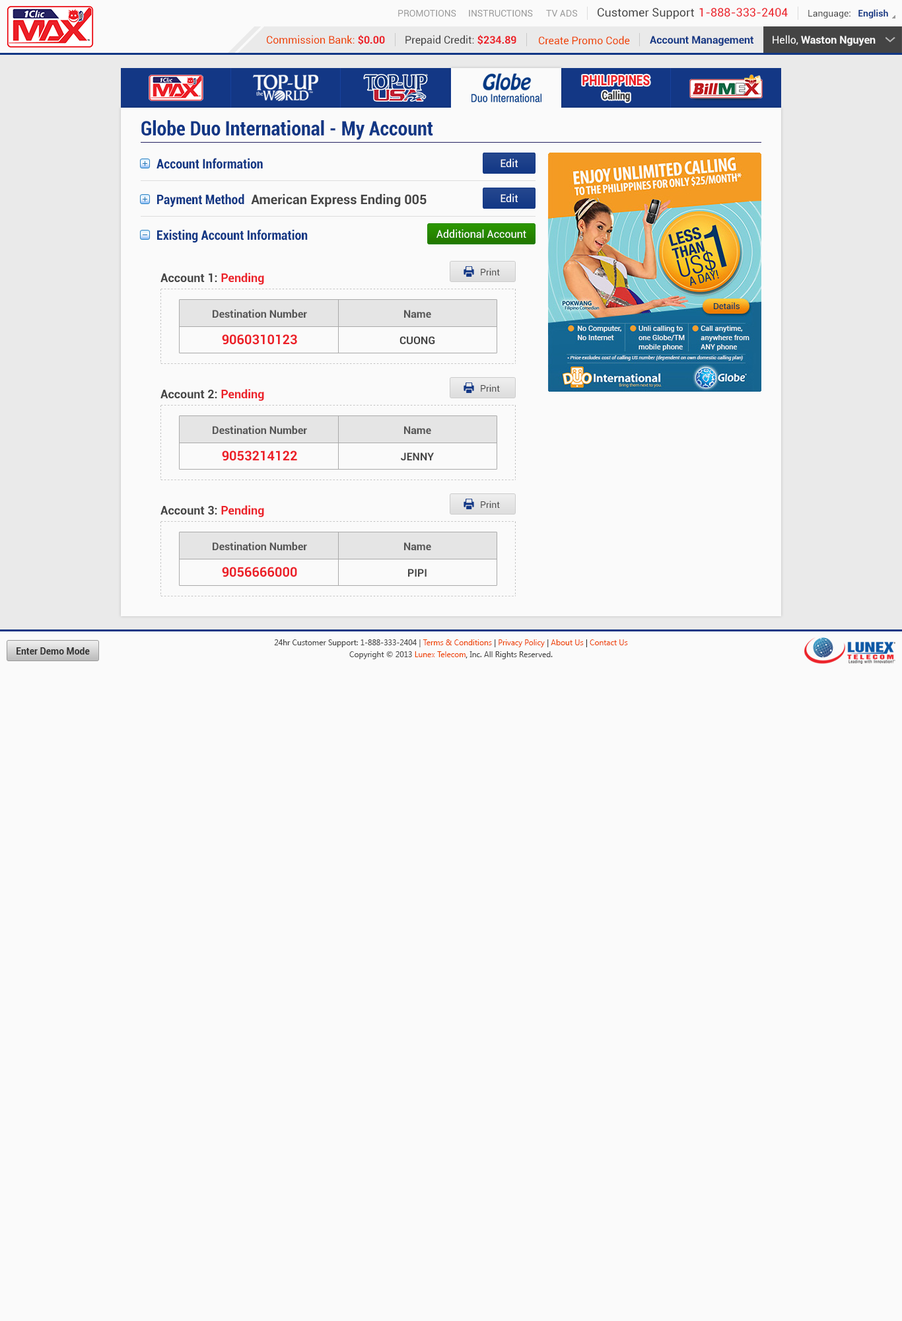
<style>
.page{position:relative;width:902px;height:1321px;background:#fafafa}
.page>*{position:absolute;margin:0}
.t1{font:9.2px "Roboto-Regular";color:#999999}
.t2{font:11.6px "Roboto-Regular";color:#444444}
.t3{font:11.6px "Roboto-Regular";color:#ec2029}
.t4{font:9.2px "Roboto-Regular";color:#444444}
.t5{font:9.2px "Roboto-Bold";color:#123785}
.t6{font:10.6px "Roboto-Regular";color:#ee4400}
.t7{font:10.6px "Roboto-Bold";color:#ec2028}
.t8{font:10.6px "Roboto-Regular";color:#444444}
.t9{font:10.6px "Roboto-Bold";color:#123785}
.t10{font:10.6px "Roboto-Bold";color:#fafafa}
.t11{font:10.6px "Roboto-Regular";color:#fafafa}
.t12{font:14.1px "Roboto-Black";color:#ec2028;scale:0.81 1}
.t13{font:11.3px "Roboto-Black";color:#333333;scale:0.81 1}
.t14{font:19.8px "Roboto-BoldCondensed";color:#123785}
.t15{font:13.2px "Roboto-BoldCondensed";color:#123785}
.t16{font:10.6px "Roboto-Regular";color:#ffffff}
.t17{font:13.2px "Roboto-Bold";color:#444444}
.t18{font:11.9px "Roboto-Bold";color:#444444}
.t19{font:11.9px "Roboto-Bold";color:#ec222a}
.t20{font:10.6px "Roboto-Bold";color:#555555}
.t21{font:13.2px "Roboto-Bold";color:#ec2028}
.t22{font:10.6px "Roboto-Bold";color:#444444}
.t23{font:7.9px/11.9px "SegoeUI";color:#444444}
.t24{font:7.9px/11.9px "SegoeUI";color:#ee4400}
.t25{font:7.9px/11.9px "SegoeUI";color:#333333}
.t26{font:9.2px "Roboto-Bold";color:#333333}
</style>
<div class="page">
<p class="t1" style="left:398px;top:10px;width:59px;height:7px">PROMOTIONS</p>
<p class="t1" style="left:469px;top:10px;width:64px;height:7px">INSTRUCTIONS</p>
<p class="t1" style="left:546px;top:10px;width:31px;height:7px">TV ADS</p>
<p class="t2" style="left:598px;top:8px;width:96px;height:11px">Customer Support</p>
<p class="t3" style="left:700px;top:8px;width:88px;height:9px">1-888-333-2404</p>
<p class="t4" style="left:809px;top:9px;width:80px;height:9px">Language:   <span class="t5">English</span></p>
<p class="t6" style="left:267px;top:35px;width:118px;height:10px">Commission Bank: <span class="t7">$0.00</span></p>
<p class="t8" style="left:406px;top:35px;width:111px;height:11px">Prepaid Credit: <span class="t7">$234.89</span></p>
<p class="t6" style="left:539px;top:36px;width:91px;height:9px">Create Promo Code</p>
<p class="t9" style="left:650px;top:36px;width:104px;height:10px">Account Management</p>
<p class="t10" style="left:773px;top:35px;width:103px;height:11px"><span class="t11">Hello, </span>Waston Nguyen</p>
<p class="t12" style="left:583px;top:75px;width:67px;height:11px">PHILIPPINES</p>
<p class="t13" style="left:603px;top:91px;width:27px;height:11px">Calling</p>
<p class="t14" style="left:141px;top:120px;width:292px;height:20px">Globe Duo International - My Account</p>
<p class="t15" style="left:157px;top:158px;width:106px;height:11px">Account Information</p>
<p class="t16" style="left:501px;top:159px;width:18px;height:8px">Edit</p>
<p class="t17" style="left:157px;top:194px;width:270px;height:13px"><span class="t15">Payment Method</span>  American Express Ending 005</p>
<p class="t16" style="left:501px;top:194px;width:18px;height:8px">Edit</p>
<p class="t15" style="left:157px;top:229px;width:151px;height:14px">Existing Account Information</p>
<p class="t16" style="left:437px;top:229px;width:90px;height:9px">Additional Account</p>
<p class="t4" style="left:481px;top:268px;width:19px;height:7px">Print</p>
<p class="t18" style="left:161px;top:273px;width:103px;height:12px">Account 1: <span class="t19">Pending</span></p>
<p class="t20" style="left:213px;top:309px;width:94px;height:9px">Destination Number</p>
<p class="t20" style="left:404px;top:310px;width:27px;height:8px">Name</p>
<p class="t21" style="left:222px;top:334px;width:75px;height:11px">9060310123</p>
<p class="t22" style="left:400px;top:336px;width:35px;height:8px">CUONG</p>
<p class="t18" style="left:161px;top:389px;width:103px;height:12px">Account 2: <span class="t19">Pending</span></p>
<p class="t4" style="left:481px;top:385px;width:19px;height:7px">Print</p>
<p class="t20" style="left:213px;top:425px;width:94px;height:10px">Destination Number</p>
<p class="t20" style="left:404px;top:426px;width:27px;height:9px">Name</p>
<p class="t21" style="left:222px;top:451px;width:75px;height:10px">9053214122</p>
<p class="t22" style="left:401px;top:453px;width:33px;height:7px">JENNY</p>
<p class="t18" style="left:161px;top:505px;width:103px;height:12px">Account 3: <span class="t19">Pending</span></p>
<p class="t4" style="left:481px;top:501px;width:19px;height:7px">Print</p>
<p class="t20" style="left:213px;top:542px;width:94px;height:9px">Destination Number</p>
<p class="t20" style="left:404px;top:542px;width:27px;height:9px">Name</p>
<p class="t21" style="left:222px;top:567px;width:75px;height:10px">9056666000</p>
<p class="t22" style="left:408px;top:569px;width:19px;height:8px">PIPI</p>
<p class="t23" style="left:274px;top:640px;width:354px;height:19px;text-align:center">24hr Customer Support: 1-888-333-2404 | <span class="t24">Terms &amp; Conditions</span><span class="t25"> | </span><span class="t24">Privacy Policy</span><span class="t25"> | </span><span class="t24">About Us</span><span class="t25"> | </span><span class="t24">Contact Us<br></span>Copyright © 2013 <span class="t24">Lunex Telecom</span><span class="t25">,</span> Inc. All Rights Reserved.</p>
<p class="t26" style="left:17px;top:647px;width:73px;height:8px">Enter Demo Mode</p>
</div>
